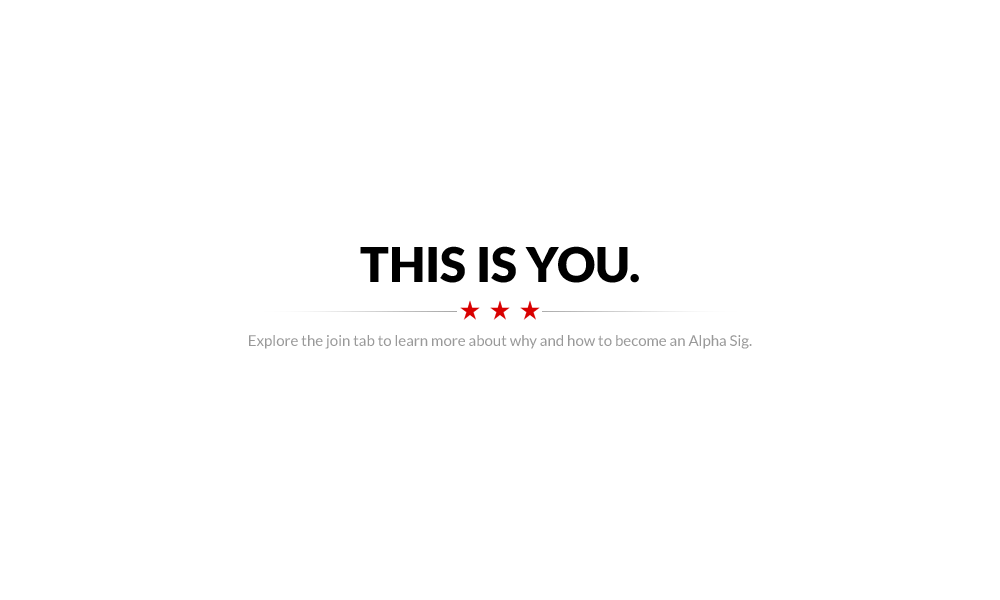
<style>
.page{position:relative;width:1000px;height:600px;background:#ffffff}
.page>*{position:absolute;margin:0}
.t1{font:15px/18px "Lato-Regular";color:#999999}
.t2{font:48px/36px "Lato-Black";color:#000000}
</style>
<div class="page">
<p class="t1" style="left:249px;top:246px;width:503px;height:103px;text-align:center"><span class="t2">THIS IS YOU.<br><br></span><br><br>Explore the join tab to learn more about why and how to become an Alpha Sig.</p>
</div>
